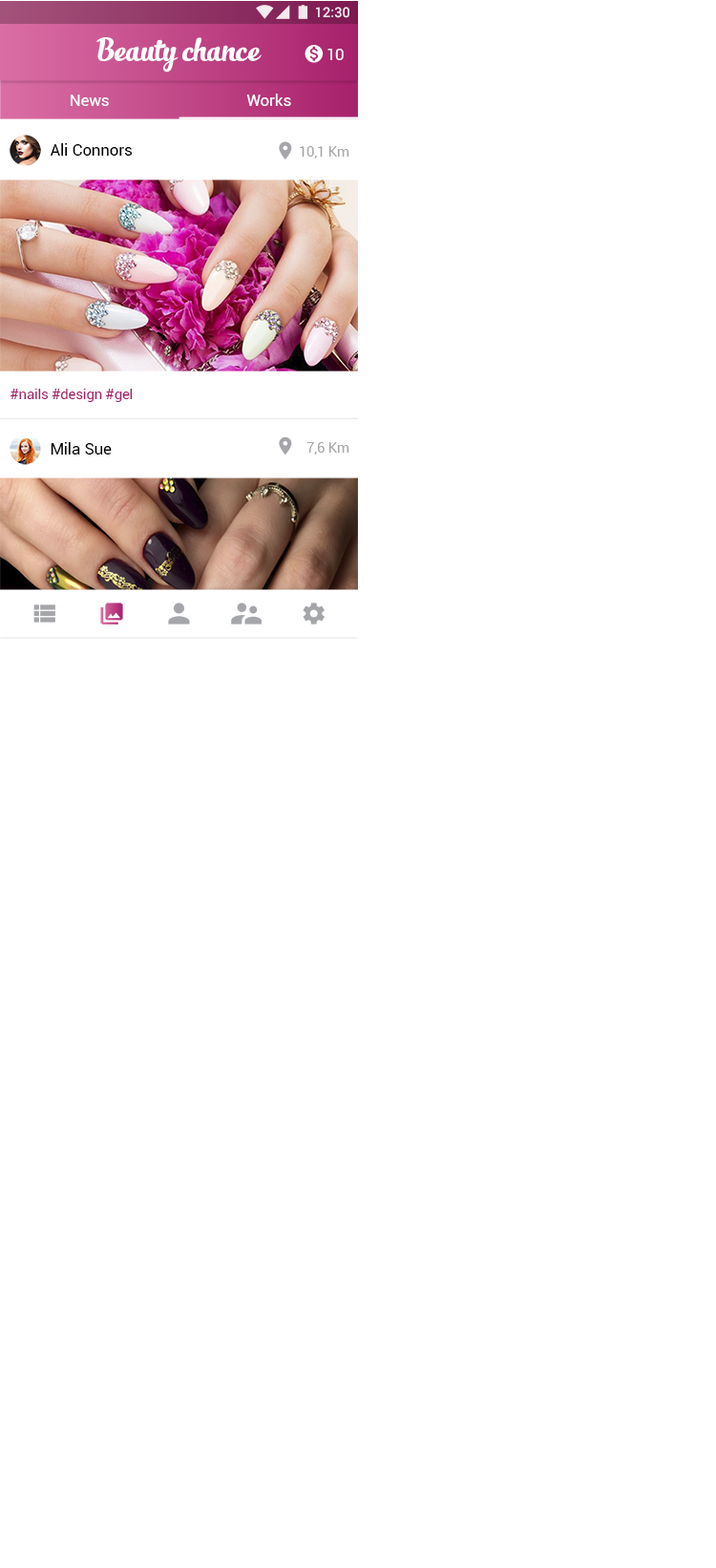
<style>
.page{position:relative;width:716px;height:1568px;background:#ffffff}
.page>*{position:absolute;margin:0}
.t1{font:13.9px "Roboto-Medium";color:#ffffff}
.t2{font:23.9px "SlimTony-Italic";color:#ffffff}
.t3{font:15.9px "Roboto-Regular";letter-spacing:-0.015em;color:#ffffff}
.t4{font:15.9px "Roboto-Regular";color:#ffffff}
.t5{font:15.9px "Roboto-Regular";letter-spacing:0.01em;color:#000000}
.t6{font:14.3px "Roboto-Regular";letter-spacing:-0.015em;color:#a5a6a9}
.t7{font:14.3px "Roboto-Regular";letter-spacing:-0.015em;color:#a7206b}
</style>
<div class="page">
<p class="t1" style="left:316px;top:7px;width:34px;height:11px">12:30</p>
<p class="t2" style="left:96px;top:37px;width:166px;height:36px">Beauty chance</p>
<p class="t3" style="left:328px;top:49px;width:16px;height:11px">10</p>
<p class="t4" style="left:71px;top:95px;width:38px;height:11px">News</p>
<p class="t4" style="left:246px;top:94px;width:45px;height:12px">Works</p>
<p class="t5" style="left:51px;top:143px;width:82px;height:13px">Ali Connors</p>
<p class="t6" style="left:300px;top:146px;width:50px;height:13px">10,1 Km</p>
<p class="t7" style="left:10px;top:389px;width:123px;height:13px">#nails #design #gel</p>
<p class="t5" style="left:51px;top:442px;width:61px;height:13px">Mila Sue</p>
<p class="t6" style="left:307px;top:442px;width:43px;height:13px">7,6 Km</p>
</div>
